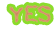
<style>
.page{position:relative;width:56px;height:29px;background:#ffffff}
.page>*{position:absolute;margin:0}
.t1{font:22px "TOBACCO";color:#c4845a;font-weight:bold}
</style>
<div class="page">
<p class="t1" style="left:9px;top:4px;width:42px;height:19px">YES</p>
</div>
